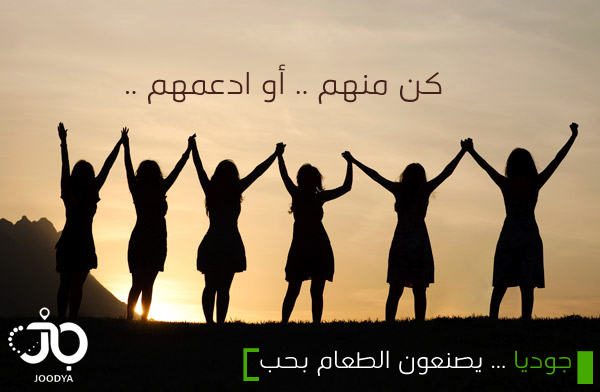
<style>
.page{position:relative;width:600px;height:392px}
.page>*{position:absolute;margin:0}
.t1{font:36px "STC-Light";color:#44211b}
.t2{font:28.5px "STC-Light";color:#ffffff}
.t3{font:28.5px "STC-Light";color:#44a900}
</style>
<div class="page">
<p class="t1" style="left:126px;top:64px;width:316px;height:40px">كن منهم .. أو ادعمهم ..</p>
<p class="t2" style="left:260px;top:350px;width:311px;height:26px"><span class="t3">جوديا </span>... يصنعون الطعام بحب</p>
</div>
